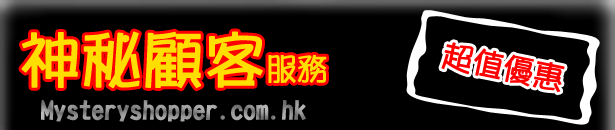
<style>
.page{position:relative;width:615px;height:130px;background:#000000}
.page>*{position:absolute;margin:0}
.t1{font:60px "DFPOP1-W5-HK-BF";color:#ffde00;font-weight:bold}
.t2{font:30px "DFPOP1-W5-HK-BF";color:#ffde00;font-weight:bold}
.t3{font:30px "DFPOP1-W5-HK-BF";color:#ff0000;font-weight:bold}
.t4{font:24px "DFPOP1-W5-HK-BF";font-weight:bold}
</style>
<div class="page">
<p class="t1" style="left:21px;top:31px;width:306px;height:58px">神秘顧客<span class="t2">服務</span></p>
<p class="t3" style="left:441px;top:42px;width:124px;height:51px;rotate:11deg">超值優惠</p>
<p class="t4" style="left:41px;top:99px;width:265px;height:23px">Mysteryshopper.com.hk</p>
</div>
